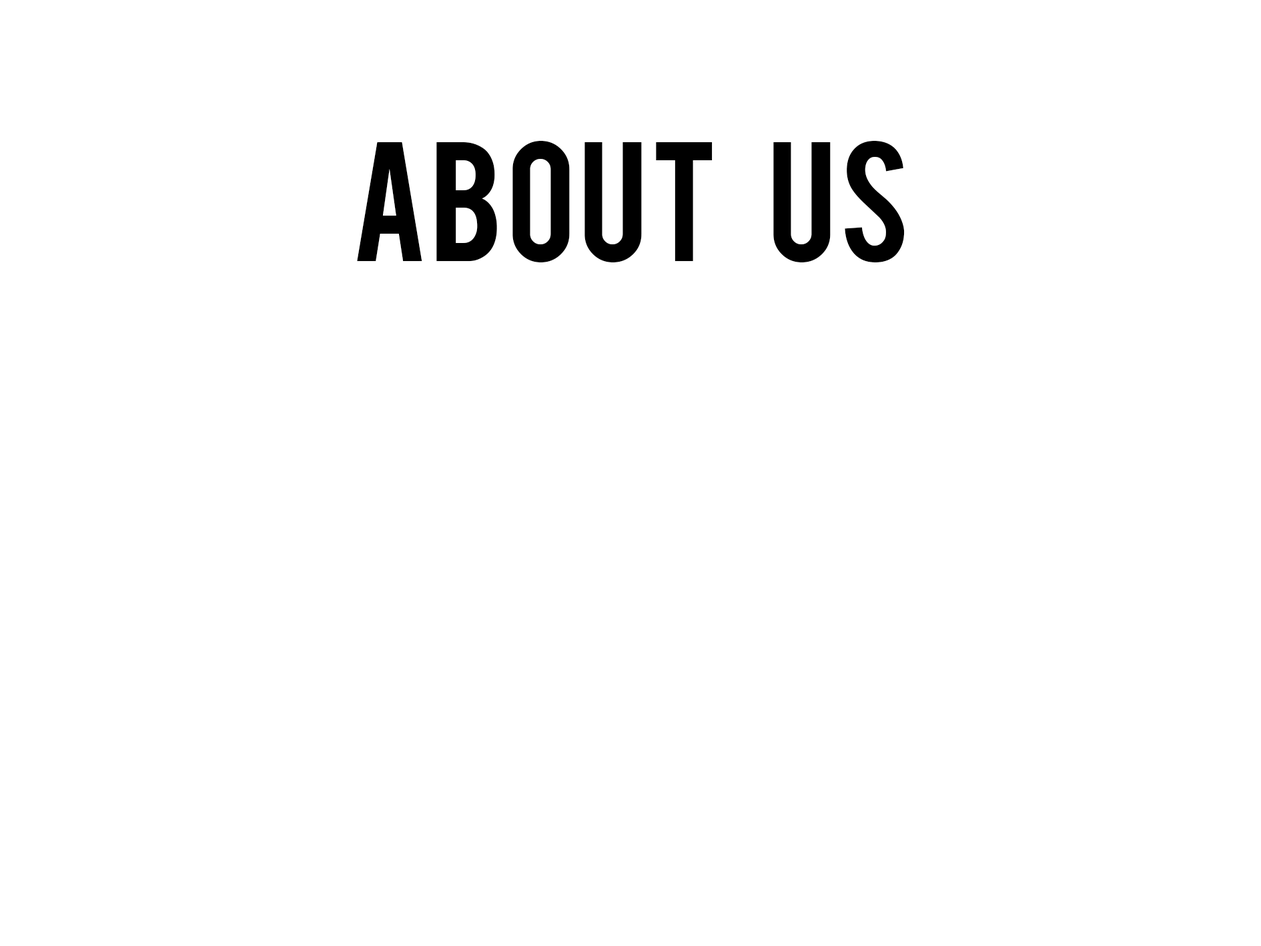
<style>
.page{position:relative;width:1261px;height:946px;background:#ffffff}
.page>*{position:absolute;margin:0}
.t1{font:133.5px "Bebas";color:#000000}
</style>
<div class="page">
<p class="t1" style="left:357px;top:141px;width:548px;height:121px">About    Us</p>
</div>
